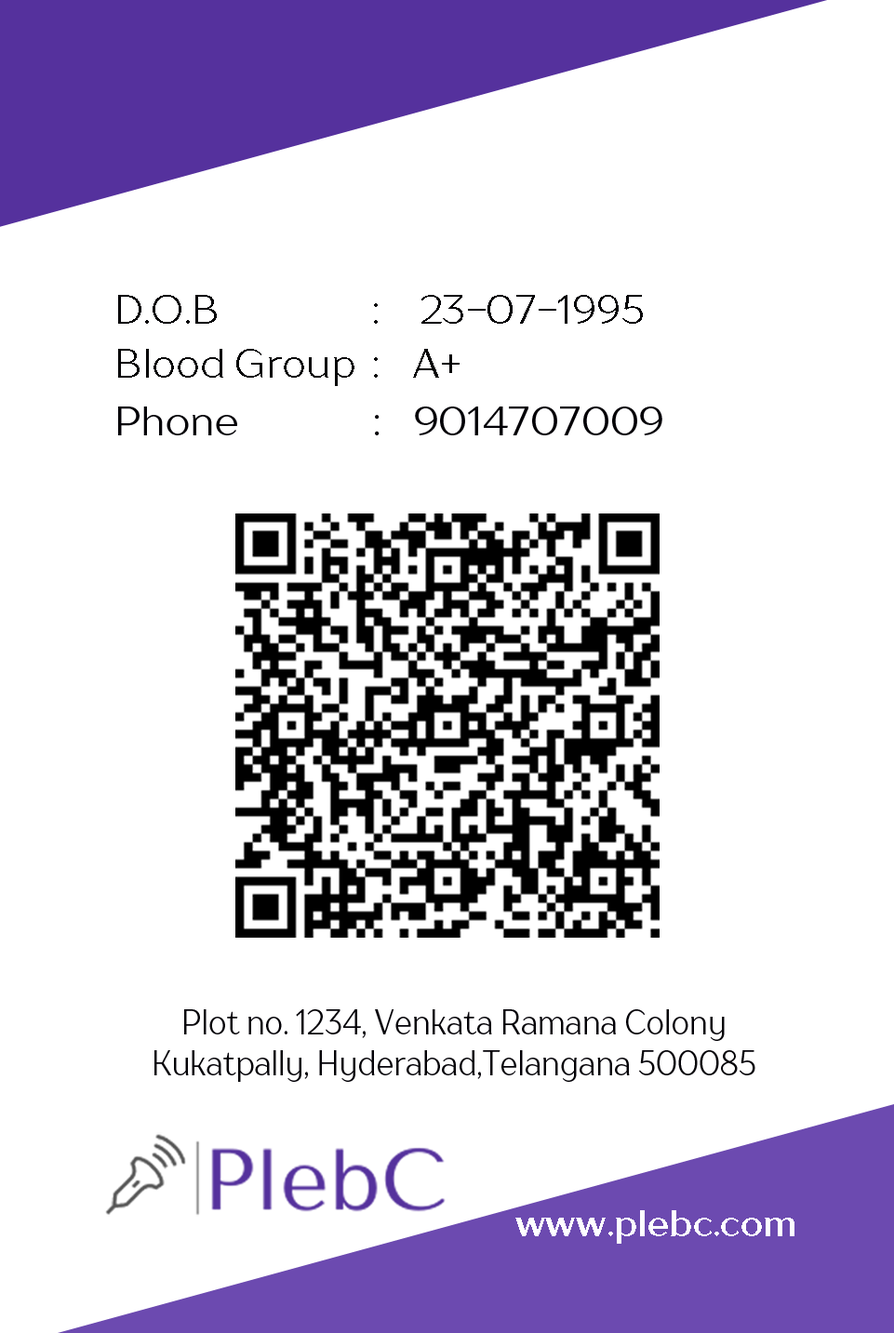
<style>
.page{position:relative;width:894px;height:1333px;background:#ffffff}
.page>*{position:absolute;margin:0}
.t1{font:40.1px "TTDrugsTrial-Regular";color:#010004}
.t2{font:40.1px "TTDrugsTrial-Regular";color:#010002}
.t3{font:40.1px "TTDrugsTrial-Regular";color:#020006}
.t4{font:34.4px "TTDrugsTrial-Regular";color:#020006;scale:0.86 1}
.t5{font:36.2px "TTDrugsTrial-Bold";color:#fefeff}
</style>
<div class="page">
<p class="t1" style="left:118px;top:295px;width:525px;height:29px">D.O.B                :    23-07-1995</p>
<p class="t2" style="left:118px;top:349px;width:342px;height:37px">Blood Group  :   A+</p>
<p class="t3" style="left:118px;top:407px;width:545px;height:28px">Phone       :   9014707009</p>
<p class="t4" style="left:154px;top:1010px;width:602px;height:72px;text-align:center">Plot no. 1234, Venkata Ramana Colony<br>Kukatpally, Hyderabad,Telangana 500085</p>
<p class="t5" style="left:516px;top:1211px;width:279px;height:33px">www.plebc.com</p>
</div>
